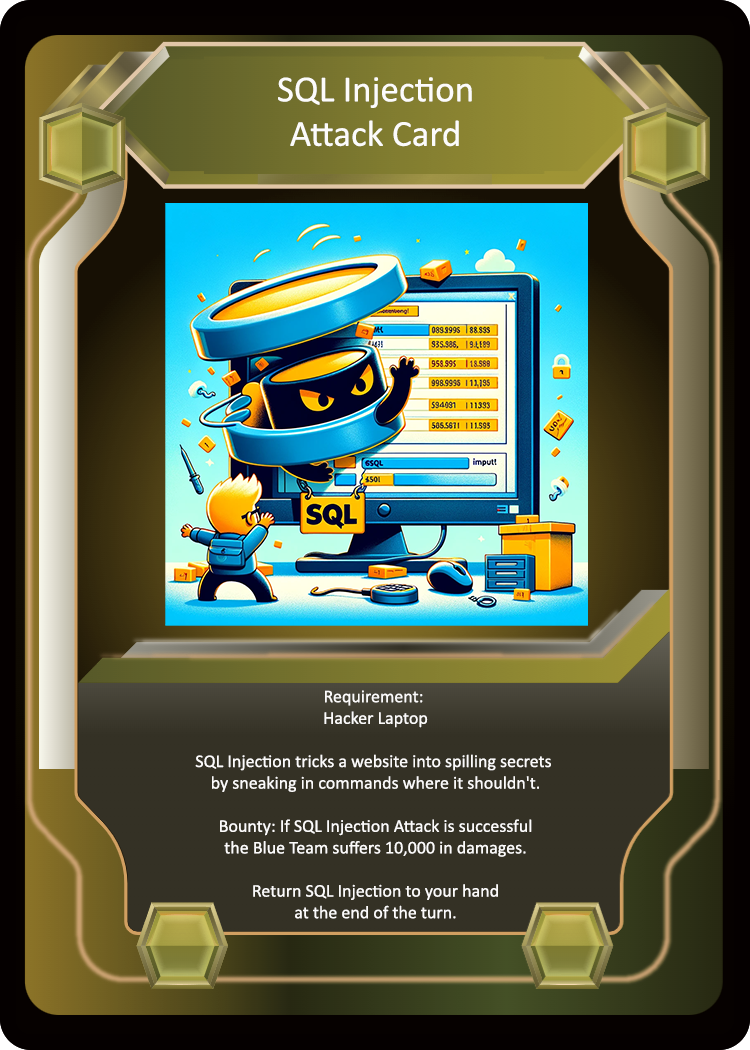
<style>
.page{position:relative;width:750px;height:1050px}
.page>*{position:absolute;margin:0}
.t1{font:37px "Calibri";color:#fcfbfb}
.t2{font:18px "Calibri";color:#fcfbfb}
</style>
<div class="page">
<p class="t1" style="left:278px;top:77px;width:194px;height:70px;text-align:center">SQL Injection<br>Attack Card</p>
<p class="t2" style="left:195px;top:690px;width:356px;height:229px;text-align:center">Requirement: <br>Hacker Laptop<br><br>SQL Injection tricks a website into spilling secrets <br>by sneaking in commands where it shouldn't.<br><br>Bounty: If SQL Injection Attack is successful<br>the Blue Team suffers 10,000 in damages.<br><br>Return SQL Injection to your hand<br>at the end of the turn.</p>
</div>
